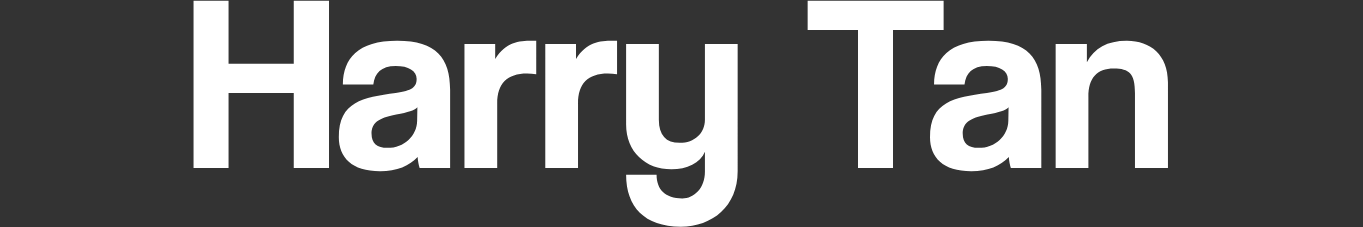
<style>
.page{position:relative;width:1363px;height:227px;background:#333333}
.page>*{position:absolute;margin:0}
.t1{font:251.8px "CoolveticaRg-Regular";color:#ffffff}
</style>
<div class="page">
<p class="t1" style="left:193px;top:0px;width:975px;height:227px">Harry Tan</p>
</div>
